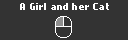
<style>
.page{position:relative;width:128px;height:40px;background:#333333}
.page>*{position:absolute;margin:0}
.t1{font:8px "NokiaCellphoneFC-Small";letter-spacing:0.025em;color:#ffffff}
</style>
<div class="page">
<p class="t1" style="left:20px;top:3px;width:89px;height:7px">A Girl and her Cat</p>
</div>
